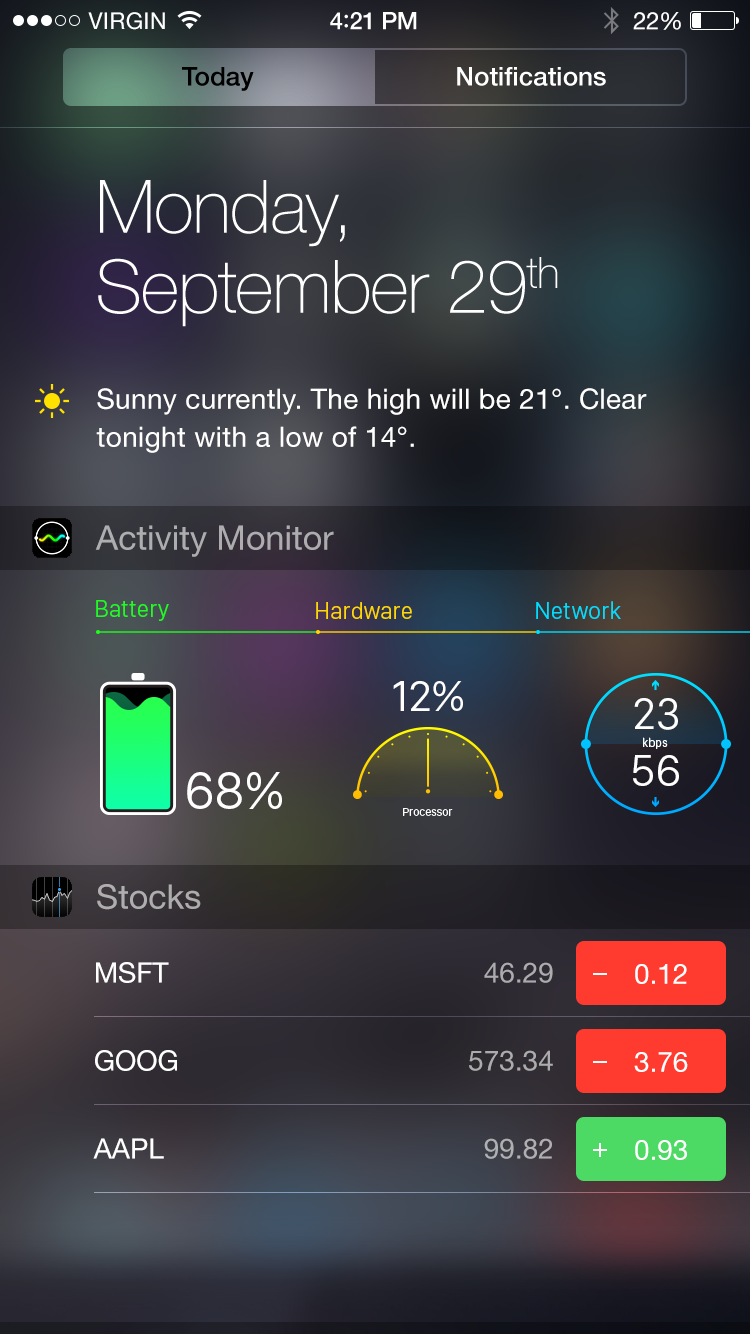
<style>
.page{position:relative;width:750px;height:1334px}
.page>*{position:absolute;margin:0}
.t1{font:23px "HelveticaNeue";letter-spacing:0.02em;color:#ffffff}
.t2{font:24px "HelveticaNeue-Medium";letter-spacing:-0.02em;color:#ffffff}
.t3{font:26px "Avenir-Medium";letter-spacing:-0.02em;color:#ffffff}
.t4{font:24px "HelveticaNeue";letter-spacing:-0.02em;color:#ffffff}
.t5{font:26px "HelveticaNeue-Medium";color:#000000}
.t6{font:26px "HelveticaNeue-Medium";color:#ffffff}
.t7{font:74px/80px "HelveticaNeue-Thin";letter-spacing:-0.015em;color:#ffffff}
.t8{font:28px/38px "HelveticaNeue";letter-spacing:0.012em;color:#ffffff}
.t9{font:34px "HelveticaNeue";color:#aeacaf}
.t10{font:24px "SanFranciscoDisplay-Light";color:#1cff1e}
.t11{font:24px "SanFranciscoDisplay-Light";color:#ffd800}
.t12{font:24px "SanFranciscoDisplay-Light";color:#00deff}
.t13{font:44.3px "SanFranciscoDisplay-Regular";color:#ffffff}
.t14{font:44.6px "SanFranciscoDisplay-Regular";color:#ffffff}
.t15{font:12.1px "SanFranciscoDisplay-Regular";color:#ffffff}
.t16{font:53.8px "SanFranciscoDisplay-Regular";color:#ffffff}
.t17{font:11.6px "SanFranciscoDisplay-Light";color:#ffffff}
.t18{font:34px "HelveticaNeue";color:#afaeaf}
.t19{font:28px "HelveticaNeue";color:#ffffff;text-transform:uppercase}
.t20{font:28px "HelveticaNeue";color:#acabae}
.t21{font:28px "HelveticaNeue";color:#ffffff}
.t22{font:28px "HelveticaNeue";color:#acabad}
.t23{font:28px "HelveticaNeue";color:#afafb2}
</style>
<div class="page">
<p class="t1" style="left:88px;top:12px;width:77px;height:18px">VIRGIN</p>
<p class="t2" style="left:330px;top:12px;width:87px;height:18px">4<span class="t3">:</span>21 PM</p>
<p class="t4" style="left:633px;top:12px;width:48px;height:18px">22%</p>
<p class="t5" style="left:182px;top:67px;width:72px;height:24px">Today</p>
<p class="t6" style="left:457px;top:67px;width:149px;height:19px">Notifications</p>
<p class="t7" style="left:98px;top:180px;width:460px;height:147px">Monday,<br>September 29th</p>
<p class="t8" style="left:96px;top:388px;width:551px;height:65px">Sunny currently. The high will be 21°. Clear tonight with a low of 14°.</p>
<p class="t9" style="left:95px;top:525px;width:239px;height:32px">Activity Monitor</p>
<p class="t10" style="left:96px;top:600px;width:73px;height:21px">Battery</p>
<p class="t11" style="left:316px;top:602px;width:96px;height:17px">Hardware</p>
<p class="t12" style="left:536px;top:601px;width:85px;height:18px">Network</p>
<p class="t13" style="left:393px;top:681px;width:70px;height:30px">12%</p>
<p class="t14" style="left:634px;top:698px;width:44px;height:32px">23</p>
<p class="t15" style="left:643px;top:737px;width:25px;height:12px">kbps</p>
<p class="t14" style="left:633px;top:755px;width:46px;height:31px">56</p>
<p class="t16" style="left:187px;top:772px;width:95px;height:37px">68%</p>
<p class="t17" style="left:403px;top:808px;width:50px;height:8px">Processor</p>
<p class="t18" style="left:97px;top:884px;width:104px;height:26px">Stocks</p>
<p class="t19" style="left:96px;top:962px;width:73px;height:21px">MSFT</p>
<p class="t20" style="left:484px;top:962px;width:69px;height:21px">46.29</p>
<p class="t21" style="left:635px;top:964px;width:52px;height:20px">0.12</p>
<p class="t19" style="left:95px;top:1050px;width:82px;height:21px">GOOG</p>
<p class="t22" style="left:469px;top:1050px;width:84px;height:21px">573.34</p>
<p class="t21" style="left:634px;top:1052px;width:54px;height:20px">3.76</p>
<p class="t19" style="left:93px;top:1138px;width:71px;height:21px">AAPL</p>
<p class="t23" style="left:484px;top:1138px;width:68px;height:21px">99.82</p>
<p class="t21" style="left:635px;top:1140px;width:52px;height:20px">0.93</p>
</div>
